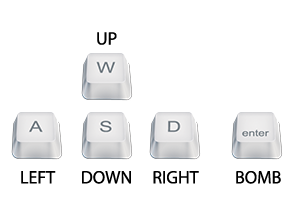
<style>
.page{position:relative;width:300px;height:200px;background:#ffffff}
.page>*{position:absolute;margin:0}
.t1{font:18px "MyriadPro-Regular";color:#000000}
</style>
<div class="page">
<p class="t1" style="left:97px;top:32px;width:20px;height:13px">UP</p>
<p class="t1" style="left:21px;top:171px;width:35px;height:13px">LEFT</p>
<p class="t1" style="left:82px;top:171px;width:49px;height:13px">DOWN</p>
<p class="t1" style="left:153px;top:171px;width:46px;height:13px">RIGHT</p>
<p class="t1" style="left:236px;top:171px;width:45px;height:13px">BOMB</p>
</div>
